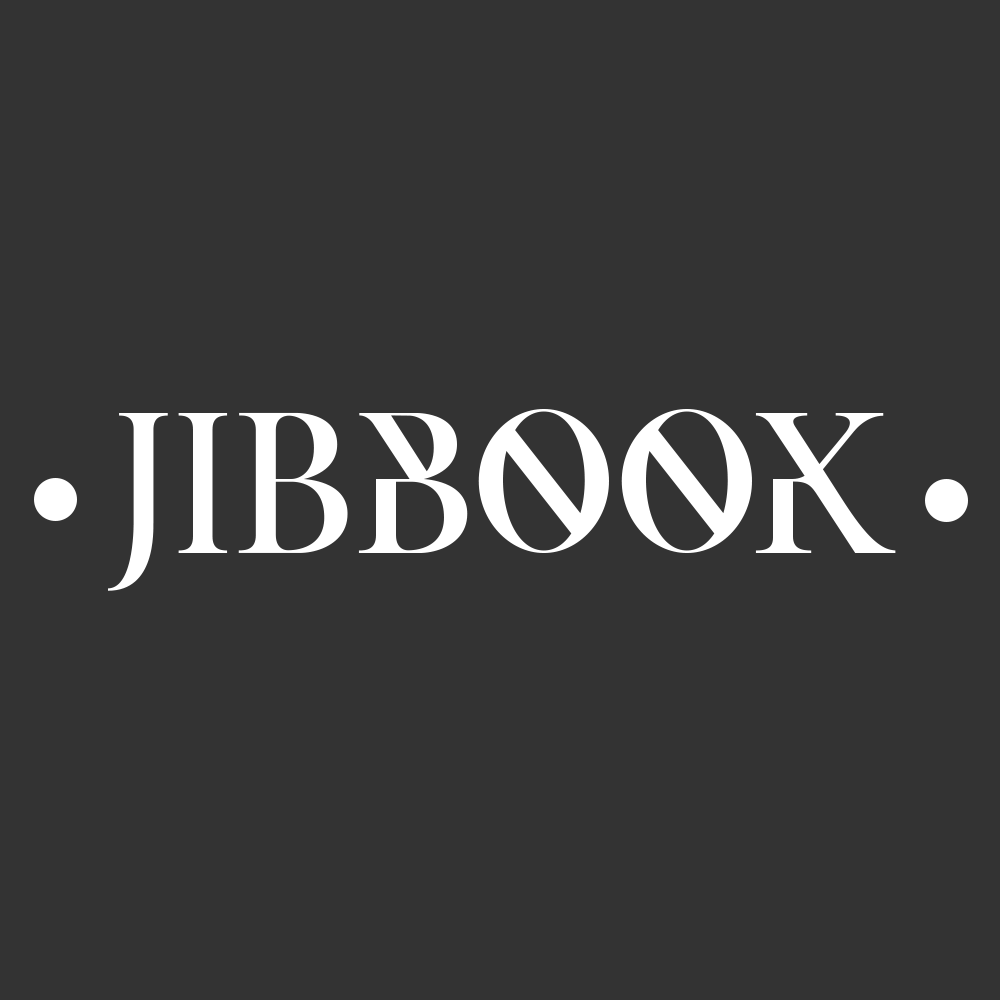
<style>
.page{position:relative;width:1000px;height:1000px;background:#333333}
.page>*{position:absolute;margin:0}
.t1{font:191.7px "ExodusDemo-St";color:#ffffff}
.t2{font:191.7px "ExodusDemo-Regular";color:#ffffff}
</style>
<div class="page">
<p class="t1" style="left:108px;top:409px;width:788px;height:182px"><span class="t2">JIB</span>BOOK</p>
</div>
